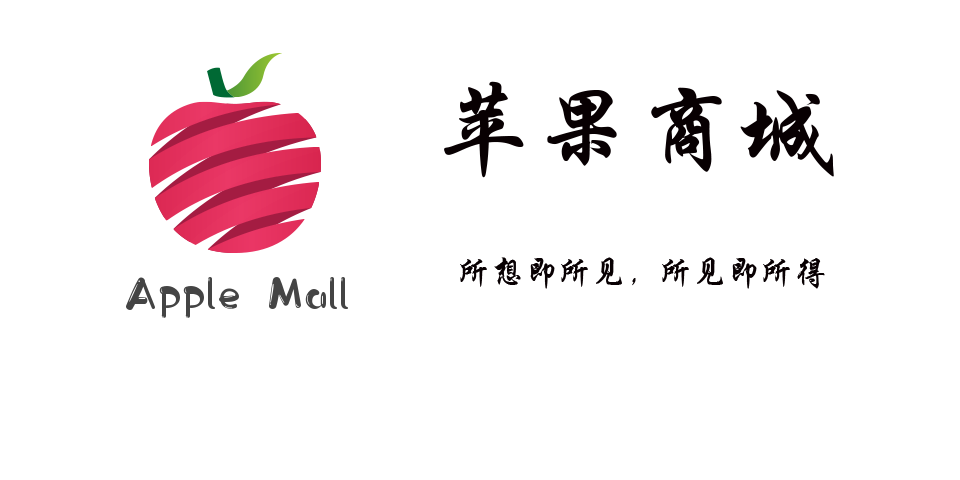
<style>
.page{position:relative;width:960px;height:480px;background:#ffffff}
.page>*{position:absolute;margin:0}
.t1{font:96px "STXingkai";color:#080002;scale:1.05 1}
.t2{font:33.7px "STXingkai";color:#080002}
</style>
<div class="page">
<p class="t1" style="left:444px;top:81px;width:390px;height:97px">苹果商城</p>
<p class="t2" style="left:460px;top:257px;width:365px;height:32px">所想即所见，所见即所得</p>
</div>
